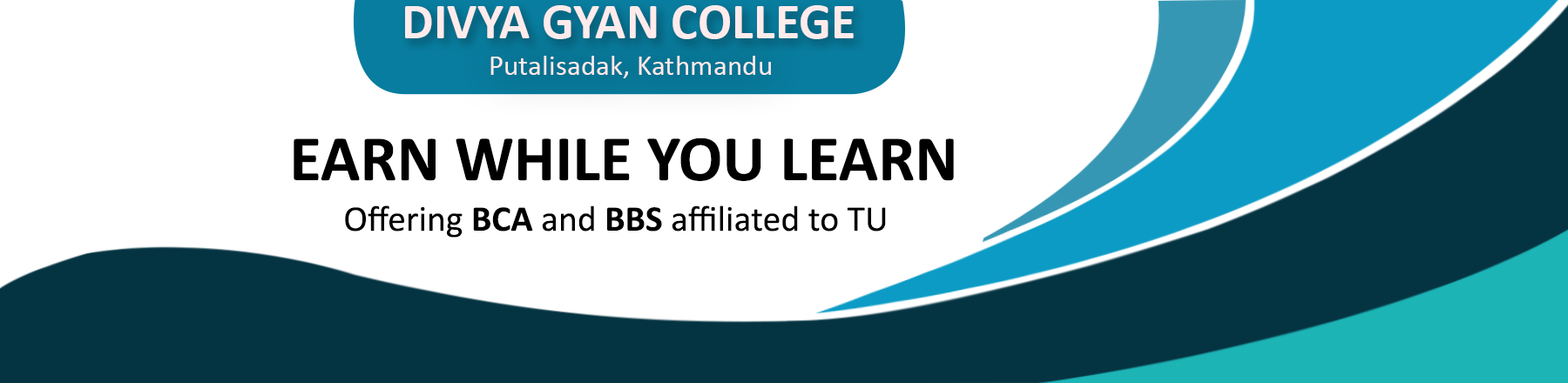
<style>
.page{position:relative;width:1568px;height:383px;background:#ffffff}
.page>*{position:absolute;margin:0}
.t1{font:50.8px "Calibri-Bold";color:#ffebeb}
.t2{font:29px "Calibri";color:#ffebeb}
.t3{font:65.3px "Calibri-Bold";color:#000000}
.t4{font:36.3px "Calibri";color:#000000}
.t5{font:36.3px "Calibri-Bold";color:#000000}
</style>
<div class="page">
<p class="t1" style="left:405px;top:5px;width:449px;height:34px">DIVYA GYAN COLLEGE</p>
<p class="t2" style="left:490px;top:56px;width:281px;height:22px">Putalisadak, Kathmandu</p>
<p class="t3" style="left:294px;top:138px;width:660px;height:43px">EARN WHILE YOU LEARN</p>
<p class="t4" style="left:345px;top:206px;width:541px;height:32px">Offering <span class="t5">BCA</span> and <span class="t5">BBS</span> affiliated to TU</p>
</div>
